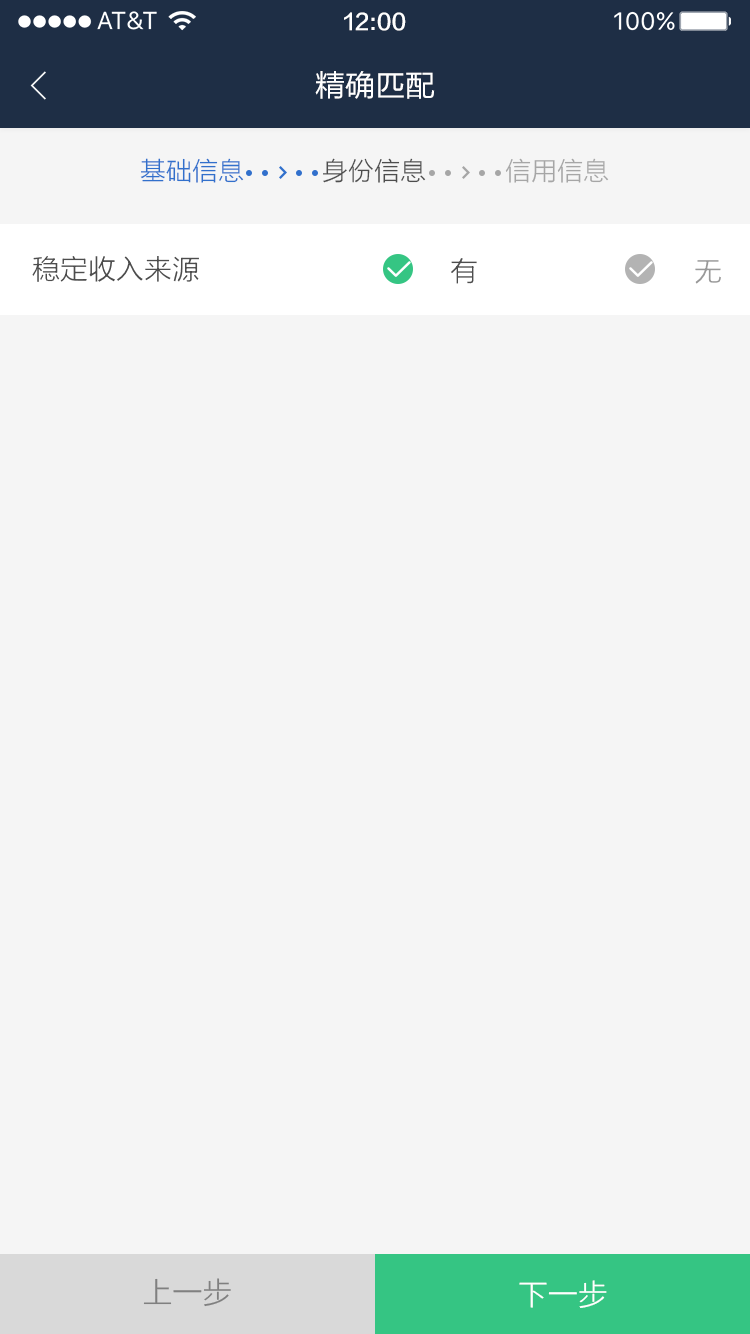
<style>
.page{position:relative;width:750px;height:1334px;background:#f5f5f5}
.page>*{position:absolute;margin:0}
.t1{font:22px "FZLTZHK--GBK1-0";color:#ffffff}
.t2{font:30px "FZLTHJW--GB1-0";color:#ffffff}
.t3{font:26px "FZLTXHK";color:#3170cc}
.t4{font:26px "FZLTXHK";color:#4d4d4d}
.t5{font:26px "FZLTXHK";color:#a6a6a6}
.t6{font:28px "FZLTXHK";color:#4d4d4d}
.t7{font:28px "FZLTXHK";color:#999999}
.t8{font:30px "FZLTXHK";color:#808080}
.t9{font:30px "FZLTXHK";color:#ffffff}
</style>
<div class="page">
<p class="t1" style="left:344px;top:12px;width:62px;height:19px">12:00</p>
<p class="t2" style="left:315px;top:71px;width:120px;height:28px">精确匹配</p>
<p class="t3" style="left:140px;top:158px;width:104px;height:25px">基础信息</p>
<p class="t4" style="left:323px;top:158px;width:103px;height:25px">身份信息</p>
<p class="t5" style="left:505px;top:158px;width:104px;height:25px">信用信息</p>
<p class="t6" style="left:32px;top:256px;width:167px;height:26px">稳定收入来源</p>
<p class="t6" style="left:451px;top:258px;width:26px;height:26px">有</p>
<p class="t7" style="left:695px;top:260px;width:26px;height:24px">无</p>
<p class="t8" style="left:143px;top:1278px;width:88px;height:29px">上一步</p>
<p class="t9" style="left:519px;top:1280px;width:88px;height:28px">下一步</p>
</div>
